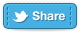
<style>
.page{position:relative;width:80px;height:32px}
.page>*{position:absolute;margin:0}
.t1{font:12px "HelveticaNeue-Bold";color:#ffffff}
</style>
<div class="page">
<p class="t1" style="left:32px;top:11px;width:33px;height:10px">Share</p>
</div>
